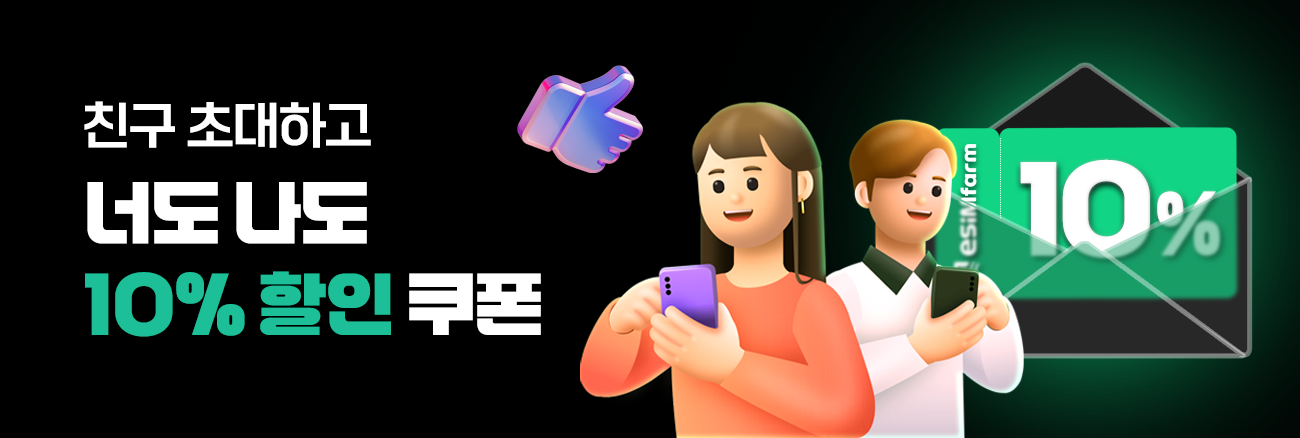
<style>
.page{position:relative;width:1300px;height:438px;background:#000000}
.page>*{position:absolute;margin:0}
.t1{font:50.3px "ONEMobileTitleRegular";letter-spacing:-0.035em;color:#ffffff}
.t2{font:102.4px "RiaSans-ExtraBold";letter-spacing:-0.07em;color:#ffffff}
.t3{font:67.6px/91.4px "RiaSans-ExtraBold";letter-spacing:-0.035em;color:#1cbf97}
.t4{font:67.6px/91.4px "RiaSans-ExtraBold";letter-spacing:-0.035em;color:#ffffff}
.t5{font:74.5px "WAGURI-TTF";letter-spacing:-0.035em}
</style>
<div class="page">
<p class="t1" style="left:84px;top:101px;width:287px;height:47px">친구 초대하고</p>
<p class="t2" style="left:1020px;top:159px;width:130px;height:99px">10</p>
<p class="t3" style="left:85px;top:182px;width:456px;height:155px"><span class="t4">너도 나도<br></span>10% 할인<span class="t4"> 쿠폰</span></p>
<p class="t5" style="left:1157px;top:191px;width:63px;height:65px">%</p>
</div>
